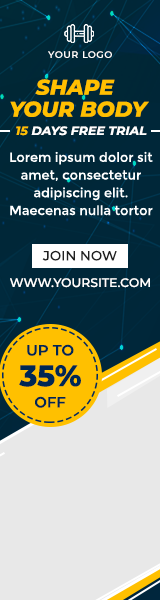
<style>
.page{position:relative;width:160px;height:600px;background:#e8e8e8}
.page>*{position:absolute;margin:0}
.t1{font:9.6px "Montserrat-SemiBold";letter-spacing:0.05em;color:#ffffff}
.t2{font:21.3px/22px "Montserrat-ExtraBoldItalic";color:#ffc000}
.t3{font:12px "Montserrat-BoldItalic";color:#ffffff;scale:1.05 1}
.t4{font:12px "Montserrat-BoldItalic";color:#ffc000;scale:1.05 1}
.t5{font:13px/17.7px "Montserrat-Regular";color:#ffffff}
.t6{font:13.4px "Montserrat-Medium";color:#212121}
.t7{font:12.4px "Montserrat-Medium";color:#ffffff}
.t8{font:14.9px "Montserrat-SemiBold";color:#002754}
.t9{font:29.7px "Montserrat-ExtraBold";color:#002754}
</style>
<div class="page">
<p class="t1" style="left:48px;top:51px;width:64px;height:7px">YOUR LOGO</p>
<p class="t2" style="left:10px;top:79px;width:139px;height:38px;text-align:center">SHAPE <br>YOUR BODY</p>
<p class="t3" style="left:16px;top:126px;width:131px;height:10px"><span class="t4">15</span> DAYS FREE TRIAL</p>
<p class="t5" style="left:10px;top:151px;width:143px;height:65px;text-align:center">Lorem ipsum dolor sit amet, consectetur <br>adipiscing elit. <br>Maecenas nulla tortor</p>
<p class="t6" style="left:42px;top:250px;width:75px;height:11px">JOIN NOW</p>
<p class="t7" style="left:10px;top:278px;width:140px;height:10px">WWW.YOURSITE.COM</p>
<p class="t8" style="left:27px;top:344px;width:47px;height:12px">UP TO</p>
<p class="t9" style="left:19px;top:365px;width:62px;height:22px">35%</p>
<p class="t8" style="left:35px;top:396px;width:31px;height:12px">OFF</p>
</div>
